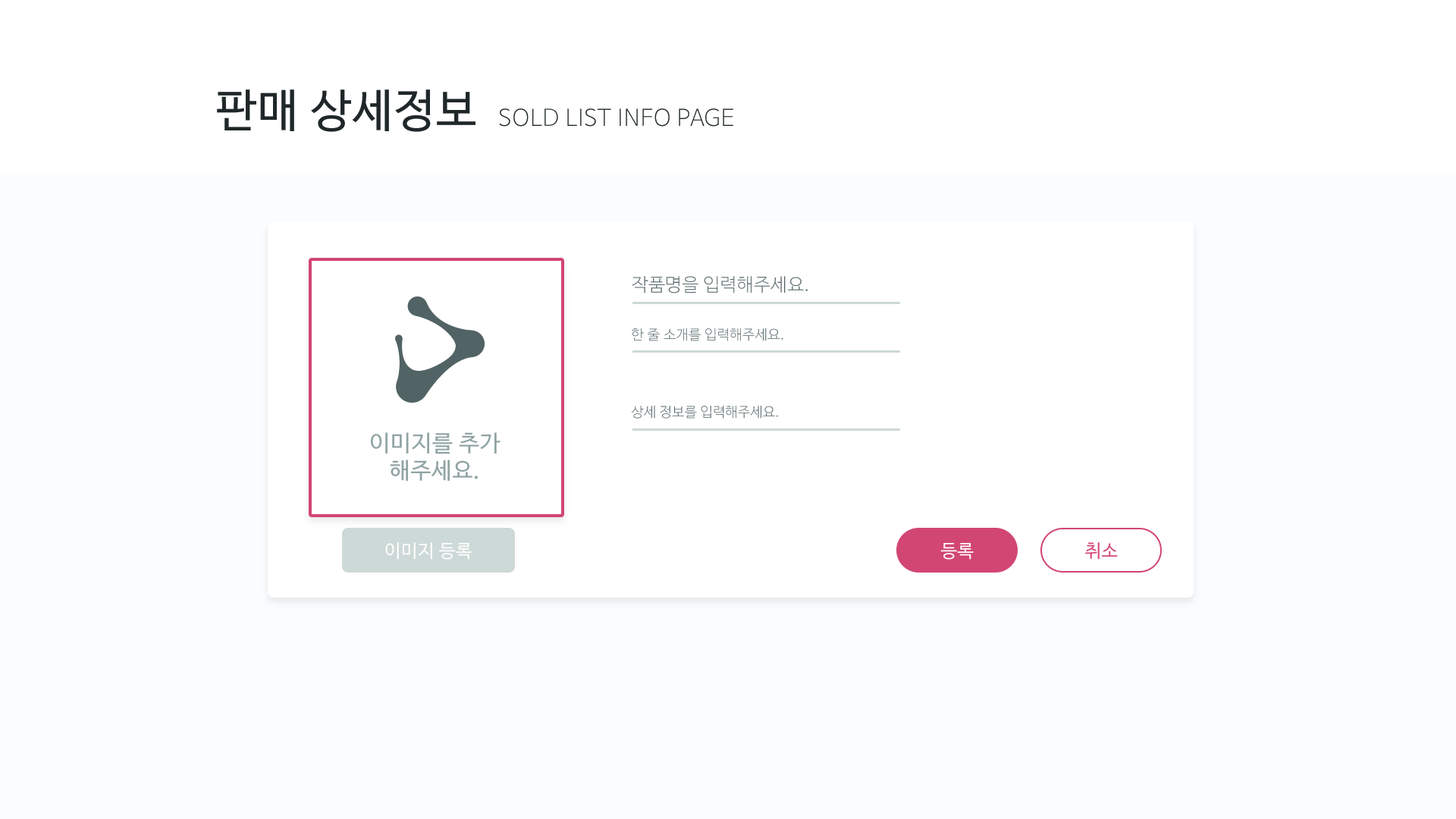
<style>
.page{position:relative;width:1456px;height:819px;background:#fafcfe}
.page>*{position:absolute;margin:0}
.t1{font:45.5px "NanumBarunGothic";letter-spacing:0.025em;color:#202728}
.t2{font:22.7px "NanumBarunGothicUltraLight";letter-spacing:0.025em;color:#202728}
.t3{font:18.2px "NanumBarunGothicUltraLight";letter-spacing:0.025em;color:#526364}
.t4{font:13.6px "NanumBarunGothicUltraLight";letter-spacing:0.025em;color:#526364}
.t5{font:22.7px "NanumBarunGothic";letter-spacing:0.025em;color:#91a5a3}
.t6{font:18.2px "NanumBarunGothic";letter-spacing:0.025em;color:#ffffff}
.t7{font:18.2px "NanumBarunGothic";letter-spacing:0.025em;color:#d14673}
</style>
<div class="page">
<p class="t1" style="left:217px;top:89px;width:258px;height:43px">판매 상세정보</p>
<p class="t2" style="left:500px;top:108px;width:233px;height:19px">SOLD LIST INFO PAGE</p>
<p class="t3" style="left:632px;top:276px;width:176px;height:17px">작품명을 입력해주세요.</p>
<p class="t4" style="left:632px;top:328px;width:151px;height:13px">한 줄 소개를 입력해주세요.</p>
<p class="t4" style="left:631px;top:406px;width:147px;height:13px">상세 정보를 입력해주세요.</p>
<p class="t5" style="left:371px;top:432px;width:129px;height:49px;text-align:center">이미지를 추가<br>해주세요.</p>
<p class="t6" style="left:385px;top:542px;width:87px;height:18px">이미지 등록</p>
<p class="t6" style="left:940px;top:543px;width:34px;height:17px">등록</p>
<p class="t7" style="left:1085px;top:542px;width:33px;height:18px">취소</p>
</div>
